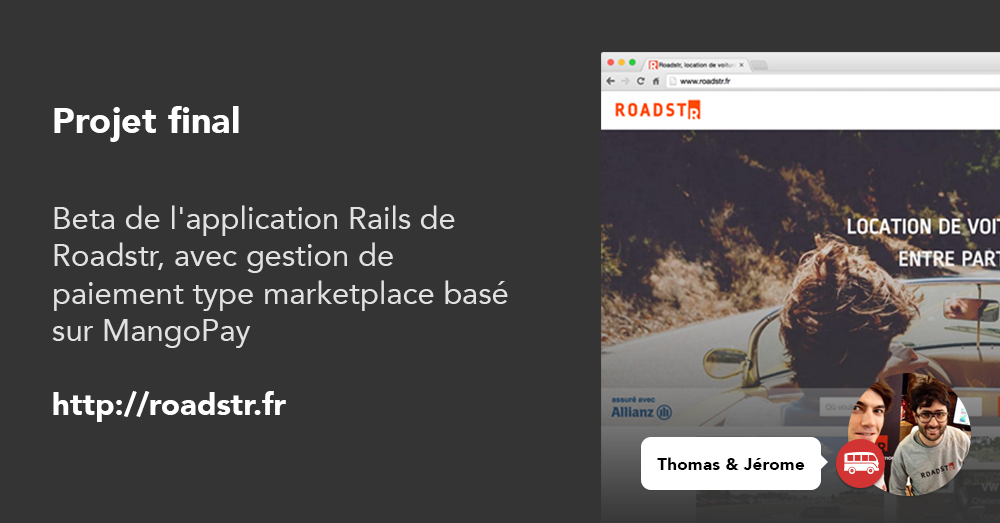
<style>
.page{position:relative;width:1000px;height:523px;background:#343434}
.page>*{position:absolute;margin:0}
.t1{font:31px "Avenir-Roman";color:#e1e1e1}
.t2{font:36.4px "Avenir-Black";color:#ffffff}
.t3{font:31px "Avenir-Black";color:#ffffff}
.t4{font:17.4px "Avenir-Black";color:#000000}
</style>
<div class="page">
<p class="t1" style="left:52px;top:106px;width:456px;height:316px"><span class="t2">Projet final<br><br></span>Beta de l'application Rails de Roadstr, avec gestion de         paiement type marketplace basé sur MangoPay<br><br><span class="t3">http://roadstr.fr</span></p>
<p class="t4" style="left:657px;top:457px;width:148px;height:13px">Thomas &amp; Jérome</p>
</div>
